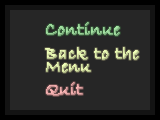
<style>
.page{position:relative;width:160px;height:120px;background:#262626}
.page>*{position:absolute;margin:0}
.t1{font:18px "BradleyHandITC";font-weight:bold}
</style>
<div class="page">
<p class="t1" style="left:46px;top:22px;width:74px;height:14px">Continue</p>
<p class="t1" style="left:45px;top:47px;width:94px;height:13px">Back to the</p>
<p class="t1" style="left:46px;top:62px;width:45px;height:11px">Menu</p>
<p class="t1" style="left:46px;top:82px;width:37px;height:14px">Quit</p>
</div>
